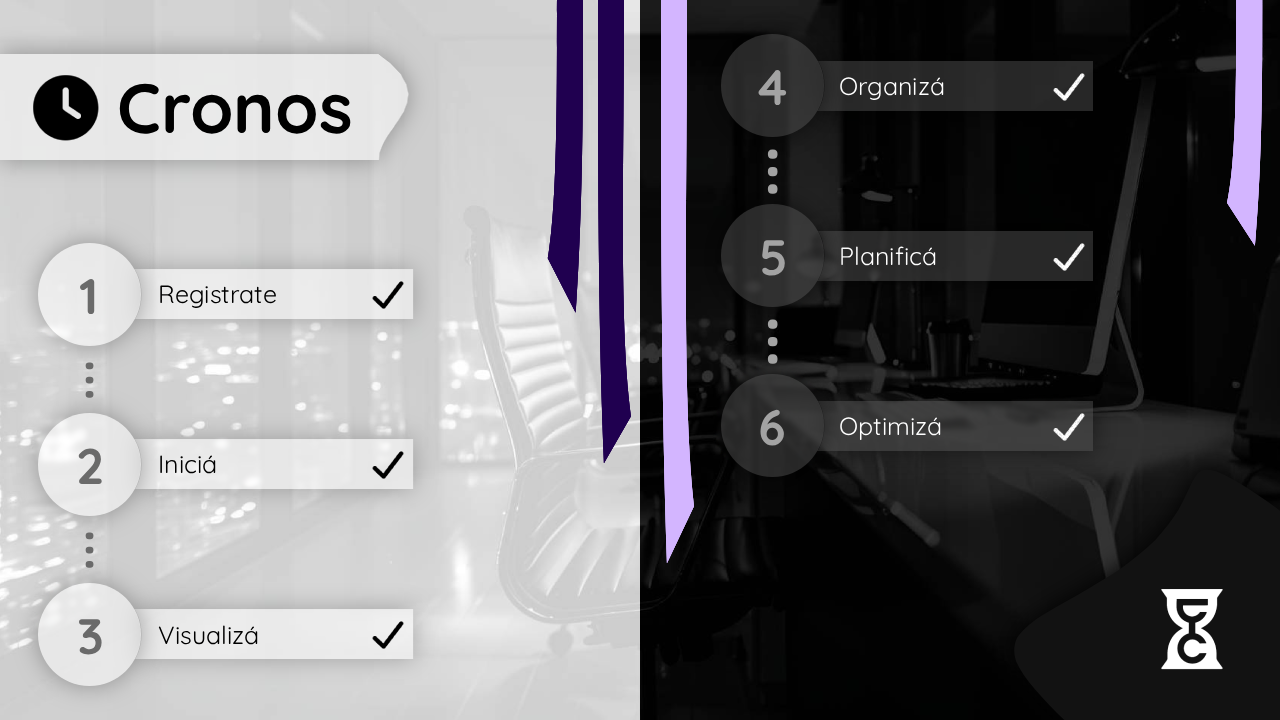
<style>
.page{position:relative;width:1280px;height:720px}
.page>*{position:absolute;margin:0}
.t1{font:50px "Quicksand-Bold";color:#a3a3a3}
.t2{font:25px "Quicksand-Regular";color:#ffffff}
.t3{font:70px "Quicksand-Bold";color:#000000}
.t4{font:70px "Quicksand-Bold";color:#a3a3a3}
.t5{font:50px "Quicksand-Bold";color:#6a6a6a}
.t6{font:25px "Quicksand-Regular";color:#000000}
.t7{font:70px "Quicksand-Medium";color:#6a6a6a}
</style>
<div class="page">
<p class="t1" style="left:758px;top:70px;width:29px;height:35px">4</p>
<p class="t2" style="left:840px;top:77px;width:104px;height:23px">Organizá</p>
<p class="t3" style="left:119px;top:83px;width:232px;height:51px">Cronos</p>
<p class="t4" style="left:767px;top:149px;width:11px;height:45px;rotate:-90deg">...</p>
<p class="t1" style="left:762px;top:240px;width:23px;height:36px">5</p>
<p class="t2" style="left:841px;top:246px;width:95px;height:20px">Planificá</p>
<p class="t5" style="left:80px;top:279px;width:15px;height:35px">1</p>
<p class="t6" style="left:160px;top:285px;width:116px;height:23px">Registrate</p>
<p class="t4" style="left:767px;top:319px;width:11px;height:45px;rotate:-90deg">...</p>
<p class="t7" style="left:85px;top:362px;width:9px;height:36px;rotate:-90deg">...</p>
<p class="t1" style="left:760px;top:409px;width:24px;height:37px">6</p>
<p class="t2" style="left:840px;top:417px;width:101px;height:23px">Optimizá</p>
<p class="t5" style="left:78px;top:448px;width:24px;height:36px">2</p>
<p class="t6" style="left:160px;top:455px;width:56px;height:19px">Iniciá</p>
<p class="t7" style="left:85px;top:532px;width:9px;height:36px;rotate:-90deg">...</p>
<p class="t5" style="left:79px;top:619px;width:23px;height:36px">3</p>
<p class="t6" style="left:158px;top:625px;width:100px;height:20px">Visualizá</p>
</div>
